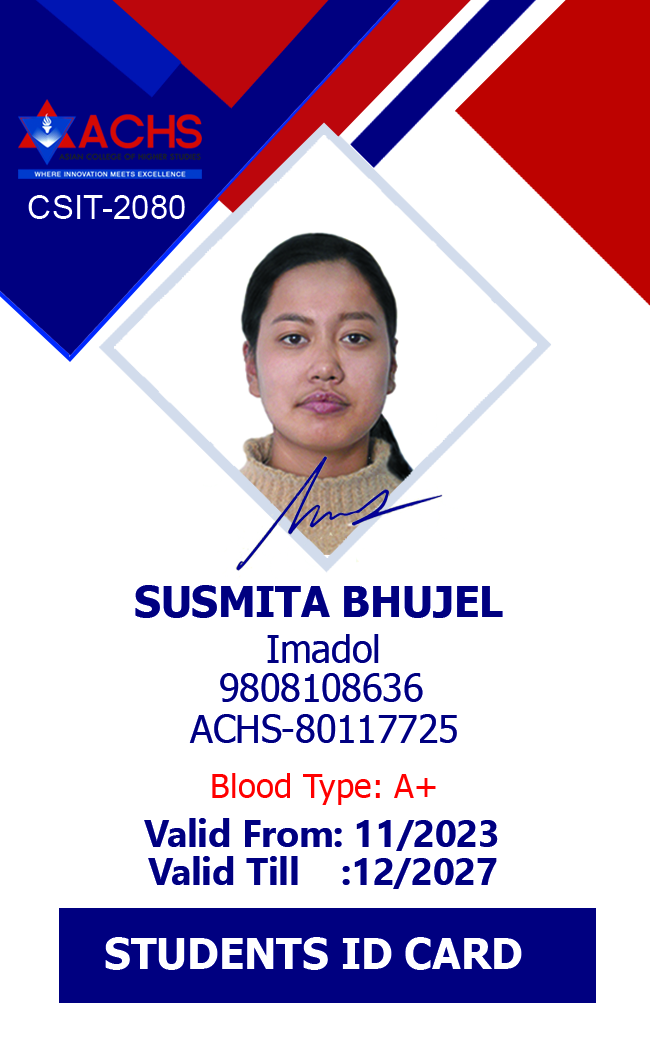
<style>
.page{position:relative;width:650px;height:1039px;background:#ffffff}
.page>*{position:absolute;margin:0}
.t1{font:33.3px "ArialMT";color:#ffffff}
.t2{font:41.7px "Tahoma-Bold";color:#000080}
.t3{font:37.5px "Tahoma";color:#000080}
.t4{font:33.3px "Tahoma";color:#ff0000}
.t5{font:37.5px "NirmalaText-Bold";color:#000080}
.t6{font:41.7px "Tahoma-Bold";color:#ffffff}
</style>
<div class="page">
<p class="t1" style="left:28px;top:195px;width:157px;height:24px">CSIT-2080</p>
<p class="t2" style="left:135px;top:585px;width:368px;height:33px">SUSMITA BHUJEL</p>
<p class="t3" style="left:267px;top:634px;width:112px;height:29px">Imadol</p>
<p class="t3" style="left:220px;top:673px;width:203px;height:29px">9808108636</p>
<p class="t3" style="left:189px;top:714px;width:268px;height:29px">ACHS-80117725</p>
<p class="t4" style="left:212px;top:773px;width:224px;height:32px">Blood Type: A+</p>
<p class="t5" style="left:144px;top:818px;width:354px;height:33px">Valid From: 11/2023</p>
<p class="t5" style="left:148px;top:856px;width:349px;height:33px">Valid Till    :12/2027</p>
<p class="t6" style="left:105px;top:937px;width:417px;height:33px">STUDENTS ID CARD</p>
</div>
